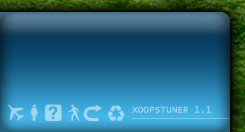
<style>
.page{position:relative;width:245px;height:132px}
.page>*{position:absolute;margin:0}
.t1{font:9px "LucidaConsole";color:#9fd6ef;text-transform:uppercase;font-weight:bold}
</style>
<div class="page">
<p class="t1" style="left:132px;top:106px;width:79px;height:7px">xoopstuner 1.1</p>
</div>
